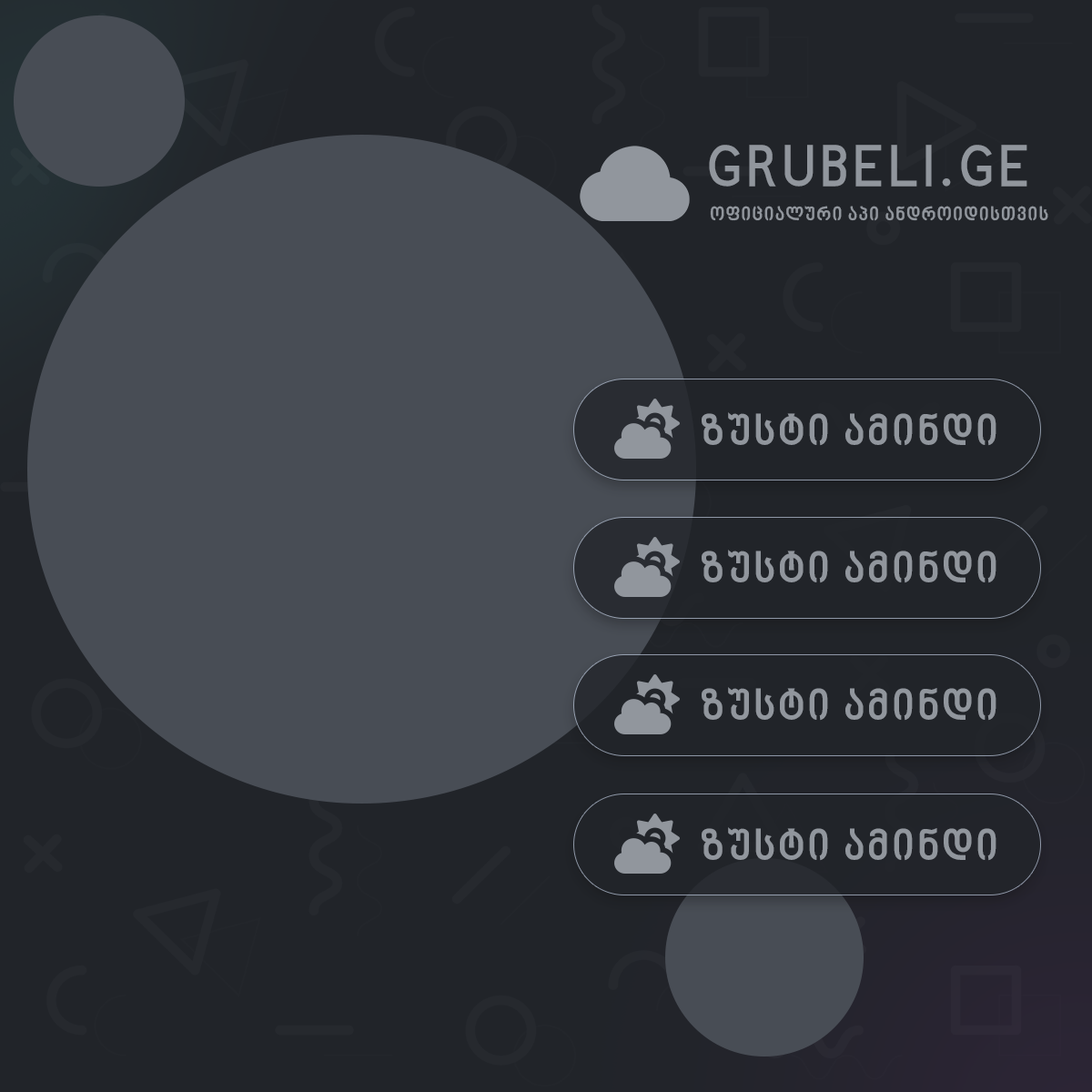
<style>
.page{position:relative;width:1092px;height:1092px;background:#212429}
.page>*{position:absolute;margin:0}
.t1{font:59px "BPGNinoMtavruli-Bold";letter-spacing:0.06em;color:#91969d}
.t2{font:18.5px "BPGNinoMtavruli-Bold";letter-spacing:0.06em;color:#91969d}
.t3{font:42.1px "BPGNinoMtavruli-Bold";letter-spacing:0.06em;color:#91969d}
</style>
<div class="page">
<p class="t1" style="left:709px;top:145px;width:318px;height:42px">GRUBELI.GE</p>
<p class="t2" style="left:710px;top:206px;width:338px;height:15px">ოფიციალური აპი ანდროიდისთვის</p>
<p class="t3" style="left:702px;top:412px;width:294px;height:34px">ზუსტი ამინდი</p>
<p class="t3" style="left:702px;top:550px;width:294px;height:33px">ზუსტი ამინდი</p>
<p class="t3" style="left:702px;top:687px;width:294px;height:34px">ზუსტი ამინდი</p>
<p class="t3" style="left:702px;top:827px;width:294px;height:34px">ზუსტი ამინდი</p>
</div>
